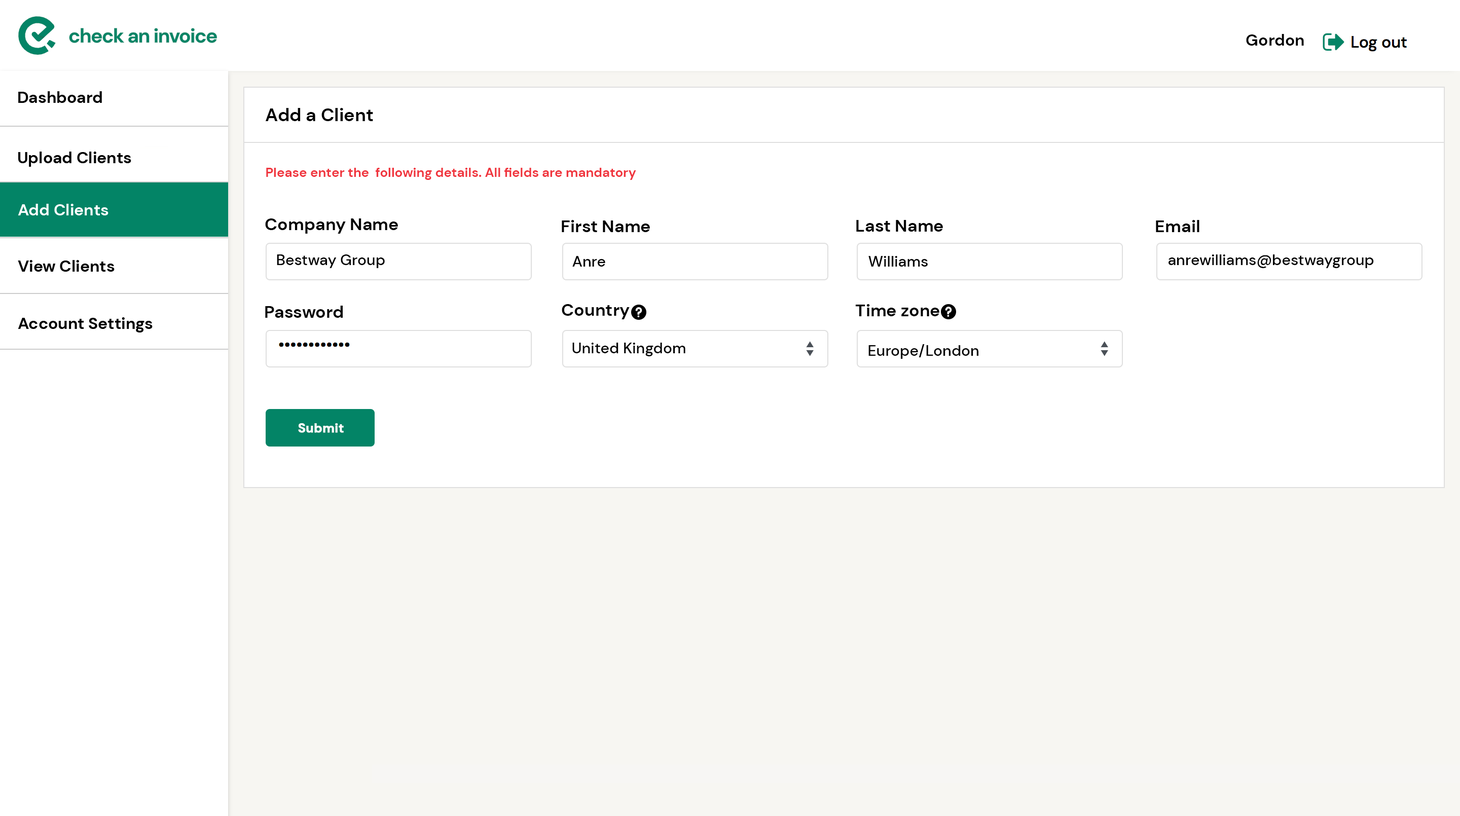
<style>
.page{position:relative;width:1460px;height:816px;background:#ffffff}
.page>*{position:absolute;margin:0}
.t1{font:16.2px "DMSans-Bold";color:#000000}
.t2{font:18.3px "DMSans-Bold";color:#010101}
.t3{font:13.2px "DMSans-Bold";color:#f0353e}
.t4{font:17.2px "DMSans-Bold";color:#000000}
.t5{font:15.2px "DMSans-Medium";color:#000000}
.t6{font:12.7px "DMSans-Bold";color:#ffffff;font-weight:bold}
</style>
<div class="page">
<p class="t1" style="left:1246px;top:34px;width:58px;height:12px">Gordon</p>
<p class="t2" style="left:265px;top:108px;width:108px;height:13px">Add a Client</p>
<p class="t3" style="left:266px;top:168px;width:370px;height:12px">Please enter the  following details. All fields are mandatory</p>
<p class="t4" style="left:265px;top:219px;width:133px;height:15px">Company Name</p>
<p class="t4" style="left:562px;top:220px;width:88px;height:12px">First Name</p>
<p class="t4" style="left:857px;top:220px;width:86px;height:12px">Last Name</p>
<p class="t4" style="left:1156px;top:220px;width:44px;height:12px">Email</p>
<p class="t5" style="left:277px;top:255px;width:108px;height:13px">Bestway Group</p>
<p class="t5" style="left:573px;top:256px;width:32px;height:11px">Anre</p>
<p class="t5" style="left:869px;top:256px;width:59px;height:11px">Williams</p>
<p class="t5" style="left:1169px;top:255px;width:205px;height:13px">anrewilliams@bestwaygroup</p>
<p class="t4" style="left:265px;top:306px;width:78px;height:12px">Password</p>
<p class="t4" style="left:562px;top:304px;width:68px;height:15px">Country</p>
<p class="t4" style="left:856px;top:304px;width:84px;height:12px">Time zone</p>
<p class="t5" style="left:573px;top:343px;width:113px;height:14px">United Kingdom</p>
<p class="t5" style="left:869px;top:344px;width:110px;height:15px">Europe/London</p>
<p class="t6" style="left:298px;top:423px;width:46px;height:10px">Submit</p>
</div>
